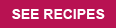
<style>
.page{position:relative;width:116px;height:28px;background:#b81252}
.page>*{position:absolute;margin:0}
.t1{font:14px "Arial-BoldMT";color:#ffffff}
</style>
<div class="page">
<p class="t1" style="left:12px;top:9px;width:93px;height:10px">SEE RECIPES</p>
</div>
